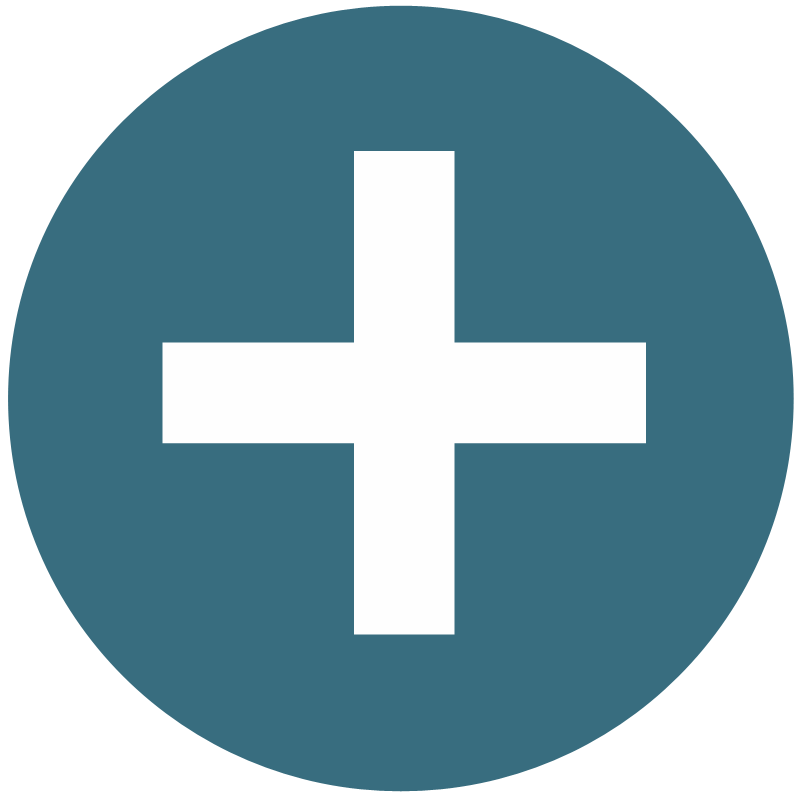
<style>
.page{position:relative;width:800px;height:800px;background:#386d7f}
.page>*{position:absolute;margin:0}
.t1{font:1933.6px "Dense-Regular";letter-spacing:-0.012em;color:#fefefe}
</style>
<div class="page">
<p class="t1" style="left:162px;top:151px;width:484px;height:484px">+</p>
</div>
